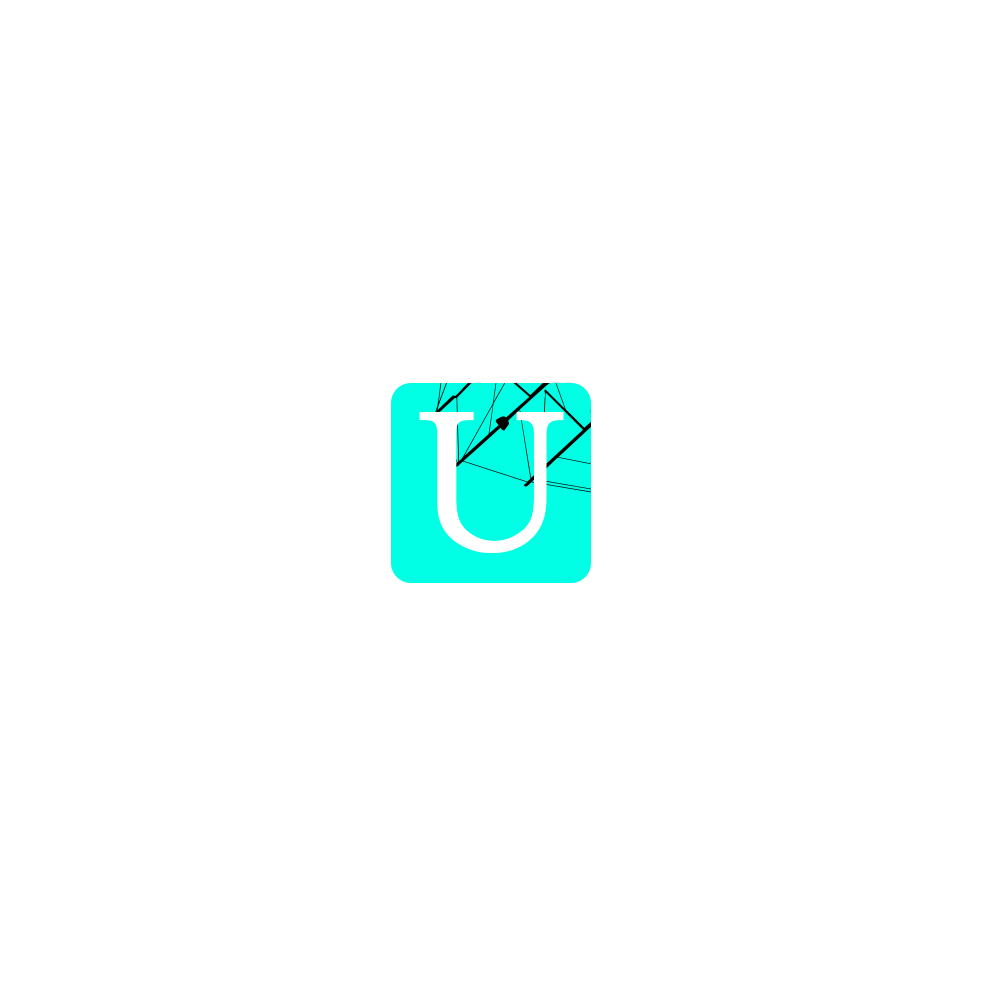
<style>
.page{position:relative;width:1000px;height:1000px;background:#ffffff}
.page>*{position:absolute;margin:0}
.t1{font:203.5px "BookmanOldStyle";color:#ffffff}
.t2{font:166.5px "Castellar";color:#ffffff}
</style>
<div class="page">
<p class="t1" style="left:419px;top:412px;width:145px;height:141px">U</p>
<p class="t2" style="left:419px;top:422px;width:142px;height:120px">U</p>
</div>
